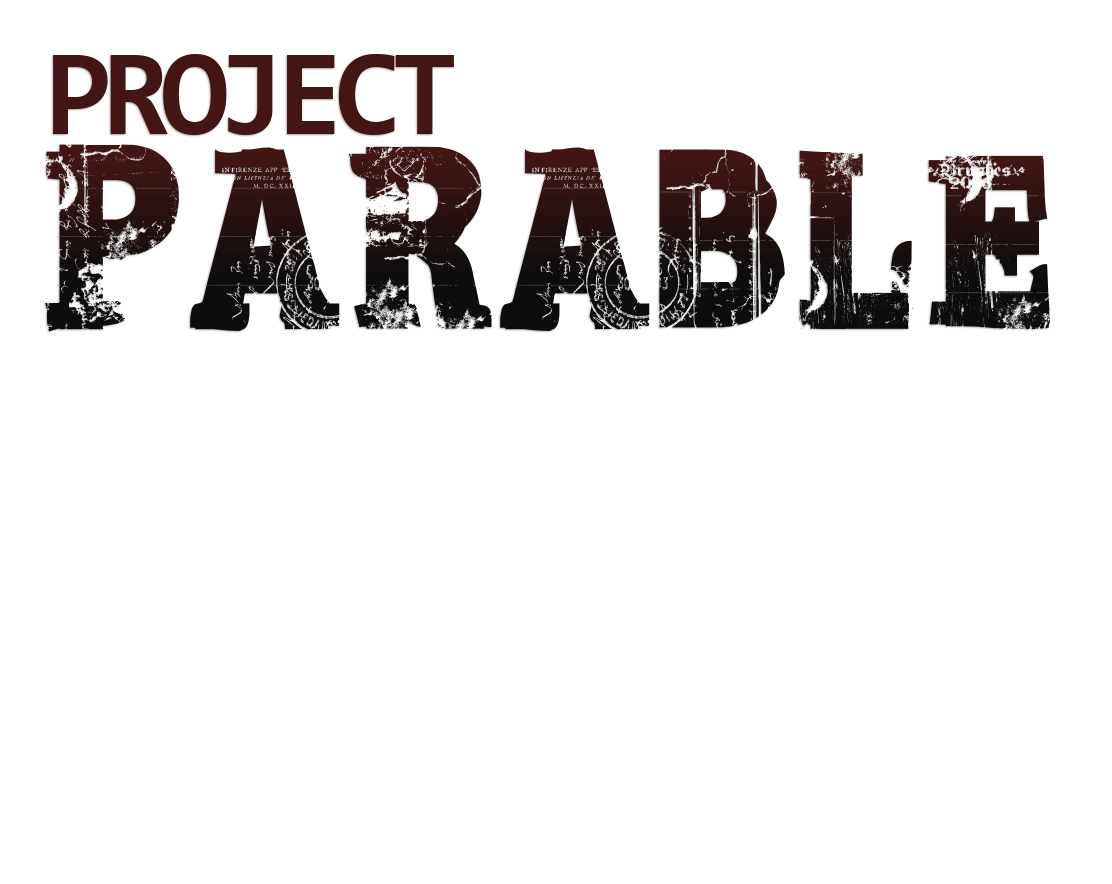
<style>
.page{position:relative;width:1112px;height:884px;background:#ffffff}
.page>*{position:absolute;margin:0}
.t1{font:122.7px "Consolas-Bold";letter-spacing:-0.08em;color:#441515}
.t2{font:193.8px "Apocalypse-Regular";color:#202020}
</style>
<div class="page">
<p class="t1" style="left:53px;top:54px;width:401px;height:81px">PROJECT</p>
<p class="t2" style="left:45px;top:144px;width:1005px;height:188px">PARABLE</p>
</div>
